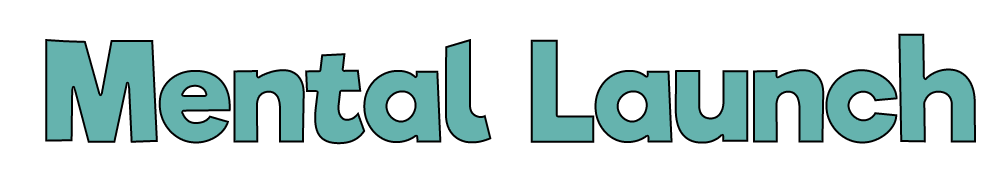
<style>
.page{position:relative;width:1000px;height:192px;background:#ffffff}
.page>*{position:absolute;margin:0}
.t1{font:134.8px "RifficFree-Bold";color:#65b3ae}
</style>
<div class="page">
<p class="t1" style="left:45px;top:33px;width:931px;height:112px">Mental Launch</p>
</div>
